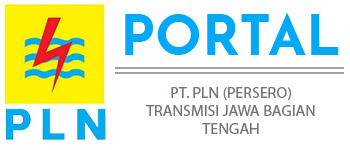
<style>
.page{position:relative;width:350px;height:150px;background:#ffffff}
.page>*{position:absolute;margin:0}
.t1{font:54.8px "JosefinSans-Bold";color:#00a9f8}
.t2{font:15.2px "MyriadPro-Regular";color:#7a7172;scale:1.05 1}
</style>
<div class="page">
<p class="t1" style="left:125px;top:13px;width:214px;height:42px">PORTAL</p>
<p class="t2" style="left:146px;top:87px;width:169px;height:47px;text-align:center">PT. PLN (PERSERO)<br>TRANSMISI JAWA BAGIAN<br>TENGAH</p>
</div>
